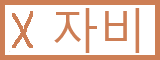
<style>
.page{position:relative;width:160px;height:60px;background:#ffffff}
.page>*{position:absolute;margin:0}
.t1{font:48px "MalgunGothicRegular";color:#cd7e55}
</style>
<div class="page">
<p class="t1" style="left:54px;top:8px;width:86px;height:45px">자비</p>
</div>
